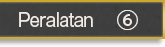
<style>
.page{position:relative;width:165px;height:47px;background:#3e3e3e}
.page>*{position:absolute;margin:0}
.t1{font:18px "GothicMB101Pro-Regular";letter-spacing:-0.04em;color:#f2ebe5;scale:0.9 1}
</style>
<div class="page">
<p class="t1" style="left:19px;top:12px;width:74px;height:15px">Peralatan</p>
</div>
